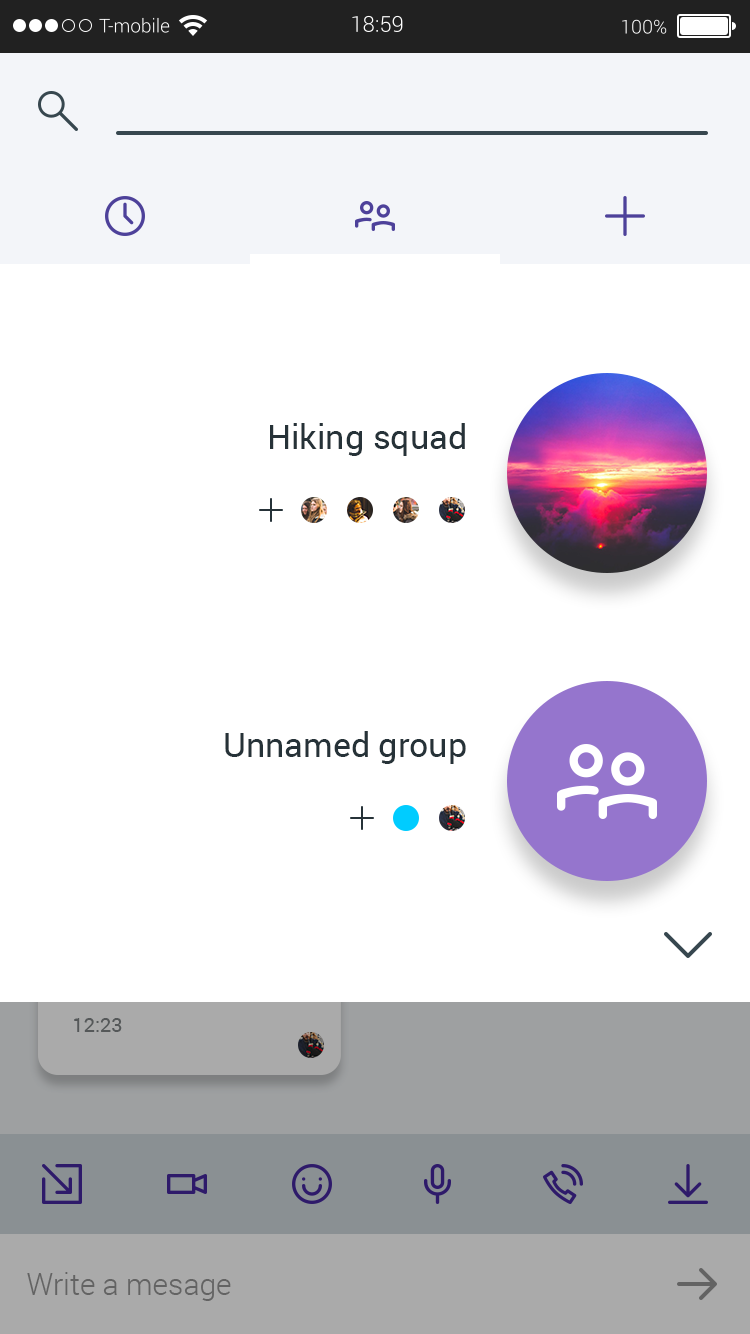
<style>
.page{position:relative;width:750px;height:1334px;background:#ffffff}
.page>*{position:absolute;margin:0}
.t1{font:34px "Roboto-Regular";color:#263238}
.t2{font:20px "Roboto-Regular";color:#555859}
.t3{font:30px "Roboto-Light";color:#636363}
</style>
<div class="page">
<p class="t1" style="left:270px;top:423px;width:195px;height:33px">Hiking squad</p>
<p class="t1" style="left:225px;top:731px;width:241px;height:33px">Unnamed group</p>
<p class="t2" style="left:74px;top:1018px;width:48px;height:14px">12:23</p>
<p class="t3" style="left:27px;top:1272px;width:204px;height:29px">Write a mesage</p>
</div>
